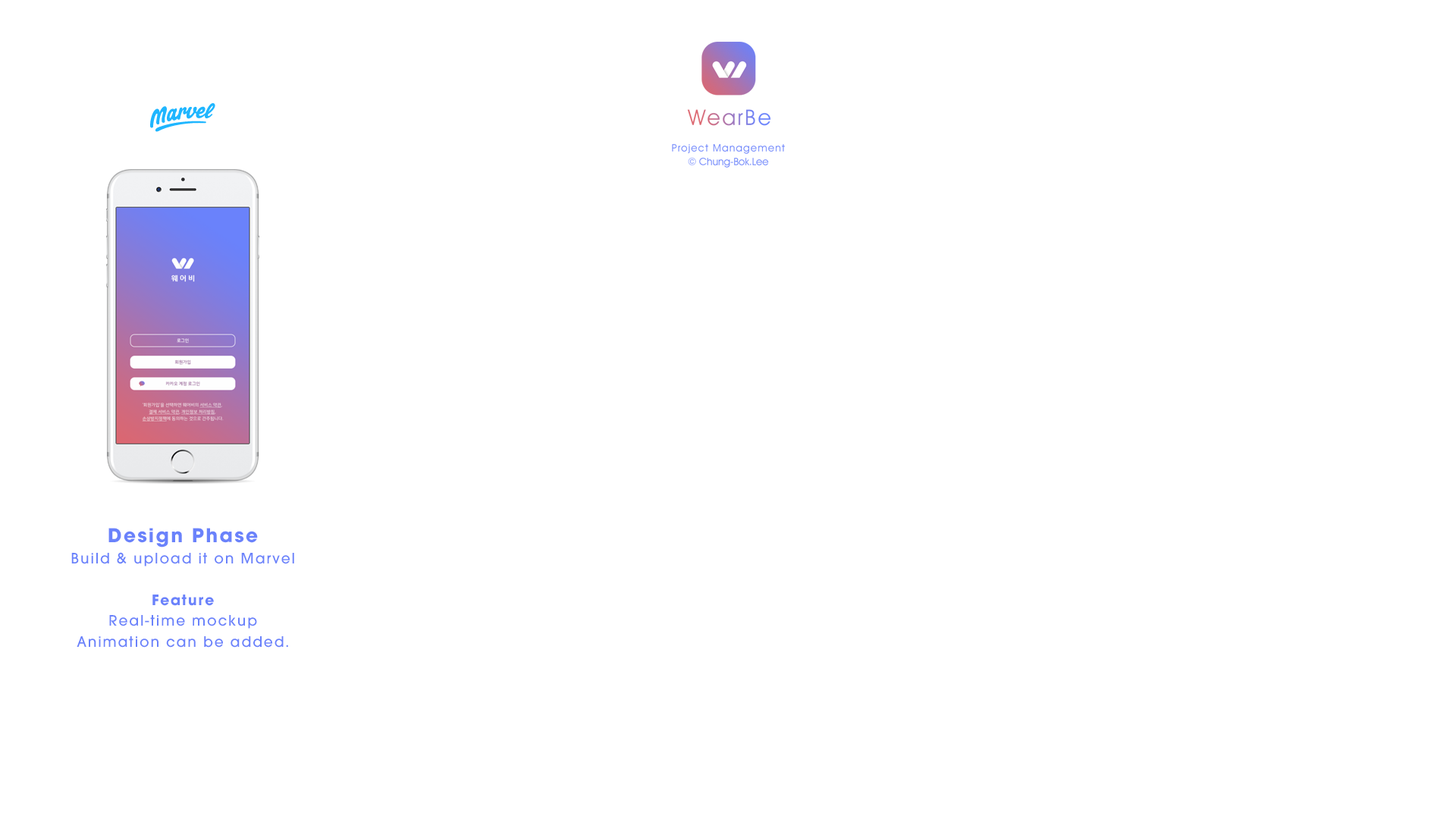
<style>
.page{position:relative;width:1456px;height:819px;background:#ffffff}
.page>*{position:absolute;margin:0}
.t1{font:15.8px/20.9px "AvantGardeMdITC";letter-spacing:0.09em;color:#6a82fb}
.t2{font:21.1px/20.9px "AvantGardeMdITC-Bold";letter-spacing:0.09em;color:#6a82fb}
.t3{font:15.8px/20.9px "AvantGardeMdITC-Bold";letter-spacing:0.09em;color:#6a82fb}
</style>
<div class="page">
<p class="t1" style="left:71px;top:528px;width:223px;height:120px;text-align:center"><span class="t2">Design Phase<br></span>Build &amp; upload it on Marvel<br><br><span class="t3">Feature<br></span>Real-time mockup<br>Animation can be added.</p>
</div>
